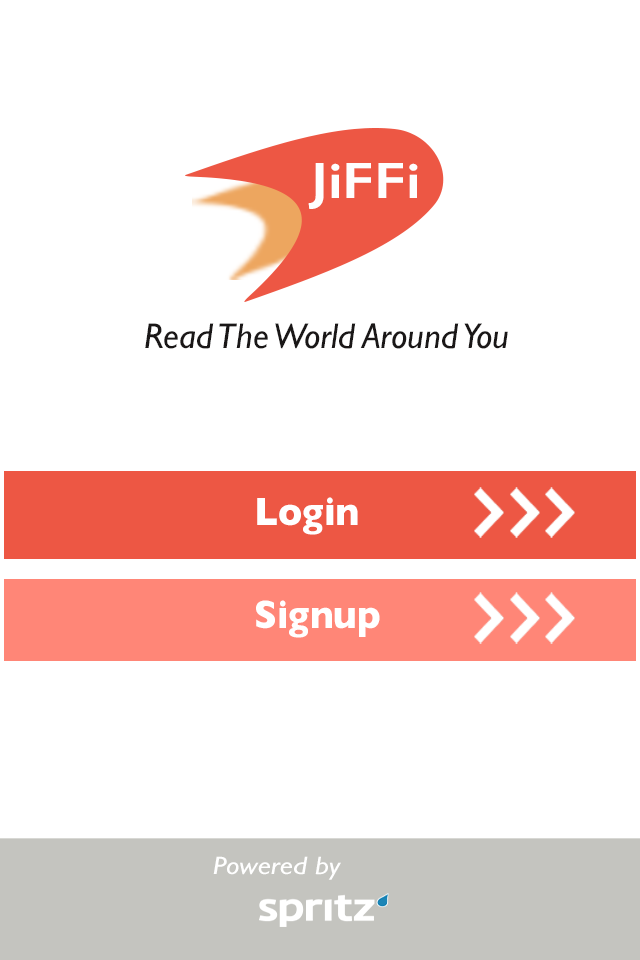
<style>
.page{position:relative;width:640px;height:960px;background:#ffffff}
.page>*{position:absolute;margin:0}
.t1{font:51.1px "GillSans-SemiBold";color:#fefefe;scale:1.16 1}
.t2{font:36px "GillSans-Italic";color:#1a1717}
.t3{font:40px "GillSans-Bold";color:#ffffff;scale:0.95 1}
.t4{font:40px/16px "GillSans-Bold";color:#ffffff;scale:0.94 1}
.t5{font:25.4px "GillSans-Italic";color:#ffffff;scale:1.18 1}
</style>
<div class="page">
<p class="t1" style="left:308px;top:163px;width:110px;height:46px">JiFFi</p>
<p class="t2" style="left:145px;top:323px;width:363px;height:26px">Read The World Around You</p>
<p class="t3" style="left:257px;top:497px;width:101px;height:38px">Login</p>
<p class="t4" style="left:256px;top:600px;width:124px;height:38px">Signup<br><br>av</p>
<p class="t5" style="left:213px;top:856px;width:128px;height:24px">Powered by</p>
</div>
